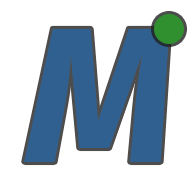
<style>
.page{position:relative;width:192px;height:192px;background:#ffffff}
.page>*{position:absolute;margin:0}
.t1{font:192px "FiraSans-BoldItalic";color:#306090}
</style>
<div class="page">
<p class="t1" style="left:24px;top:28px;width:146px;height:134px">M</p>
</div>
